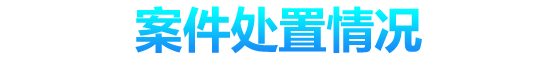
<style>
.page{position:relative;width:558px;height:59px;background:#ffffff}
.page>*{position:absolute;margin:0}
.t1{font:48px "MicrosoftYaHei-Bold"}
</style>
<div class="page">
<p class="t1" style="left:135px;top:6px;width:287px;height:48px">案件处置情况</p>
</div>
